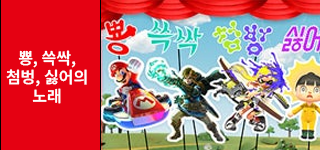
<style>
.page{position:relative;width:320px;height:150px;background:#e50112}
.page>*{position:absolute;margin:0}
.t1{font:16px "NotoSansKR-SemiBold";color:#fefefe}
</style>
<div class="page">
<p class="t1" style="left:6px;top:50px;width:81px;height:54px;text-align:center">뿅, 쓱싹,<br>첨벙, 싫어의<br>노래</p>
</div>
